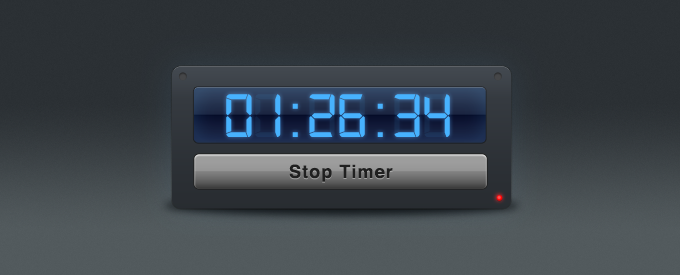
<style>
.page{position:relative;width:680px;height:275px}
.page>*{position:absolute;margin:0}
.t1{font:65px "Digital-7Mono";letter-spacing:-0.01em;color:#47b2fe}
.t2{font:65px "Digital-7";letter-spacing:-0.15em;color:#47b2fe}
.t3{font:65px "Digital-7";letter-spacing:-0.01em;color:#47b2fe}
.t4{font:18px "Helvetica-Bold";letter-spacing:0.06em;color:#202020}
</style>
<div class="page">
<p class="t1" style="left:226px;top:94px;width:224px;height:43px">01<span class="t2"> :  </span><span class="t3">26</span><span class="t2"> :  </span><span class="t3">34</span></p>
<p class="t1" style="left:226px;top:94px;width:224px;height:43px;opacity:0.1">00<span class="t2"> :  </span><span class="t3">00</span><span class="t2"> :  </span><span class="t3">00</span></p>
<p class="t4" style="left:289px;top:164px;width:104px;height:18px">Stop Timer</p>
</div>
